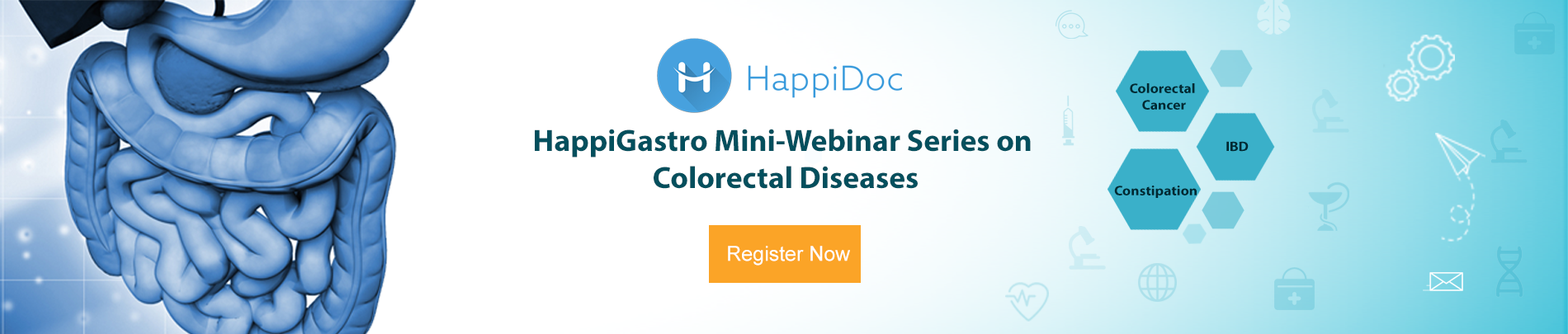
<style>
.page{position:relative;width:1568px;height:334px;background:#ffffff}
.page>*{position:absolute;margin:0}
.t1{font:13.8px "MyriadPro-Bold";color:#012932;scale:1.06 1}
.t2{font:30.9px "MyriadPro-Bold";color:#034f5d}
.t3{font:20.6px "ArialMT";color:#ffffff}
</style>
<div class="page">
<p class="t1" style="left:1130px;top:83px;width:65px;height:27px;text-align:center">Colorectal <br>Cancer</p>
<p class="t2" style="left:535px;top:129px;width:496px;height:60px;text-align:center">HappiGastro Mini-Webinar Series on <br>Colorectal Diseases</p>
<p class="t1" style="left:1226px;top:141px;width:23px;height:11px">IBD</p>
<p class="t1" style="left:1114px;top:186px;width:83px;height:12px">Constipation</p>
<p class="t3" style="left:728px;top:246px;width:122px;height:20px">Register Now</p>
</div>
